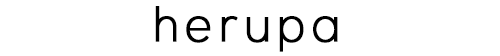
<style>
.page{position:relative;width:500px;height:56px;background:#ffffff}
.page>*{position:absolute;margin:0}
.t1{font:49.4px "NexaLight";letter-spacing:0.12em;color:#000000;font-weight:bold;scale:0.93 1}
</style>
<div class="page">
<p class="t1" style="left:155px;top:6px;width:183px;height:46px">herupa</p>
</div>
